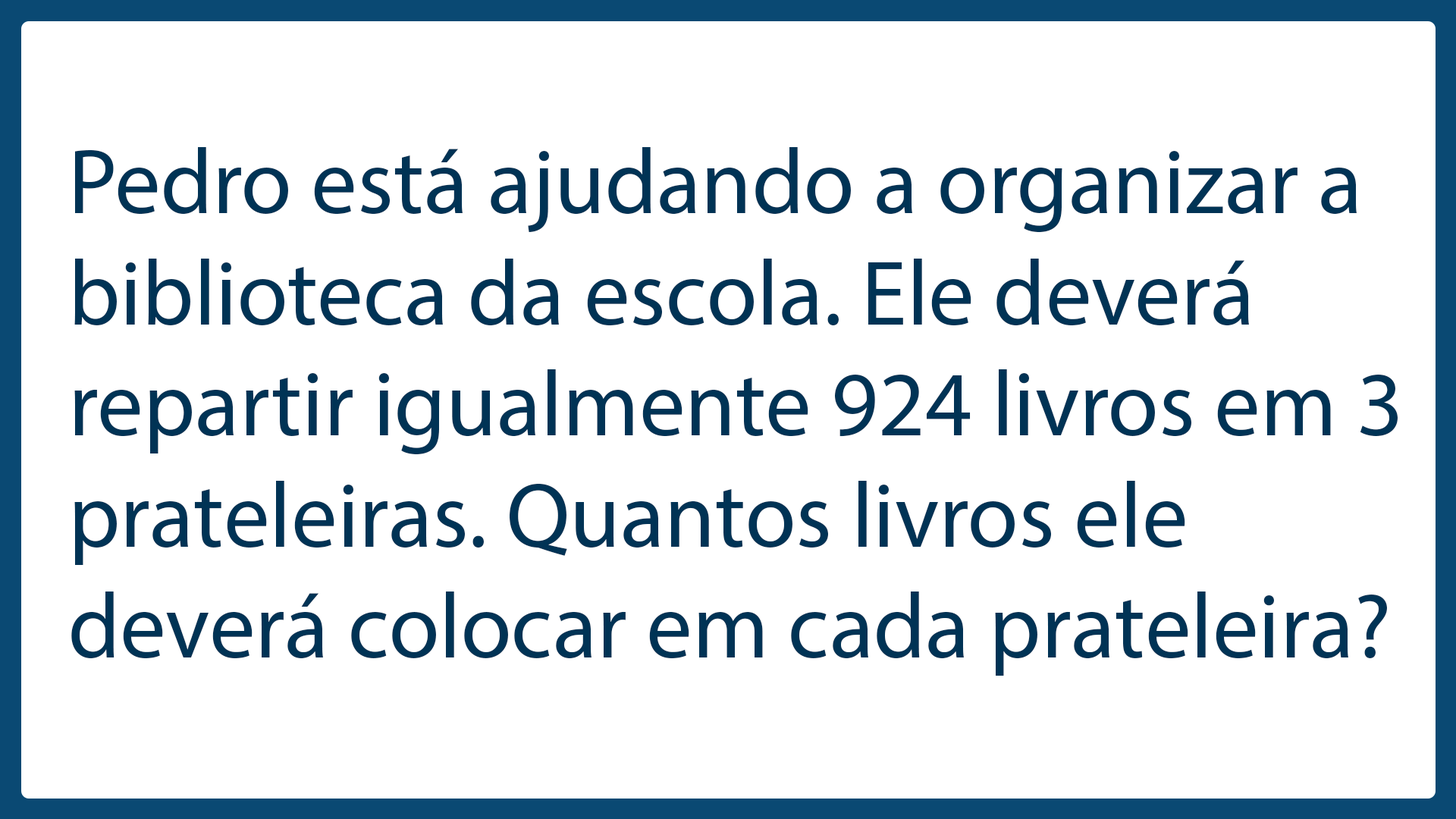
<style>
.page{position:relative;width:1456px;height:819px;background:#ffffff}
.page>*{position:absolute;margin:0}
.t1{font:92.6px "MyriadPro-Regular";color:#003355}
</style>
<div class="page">
<p class="t1" style="left:71px;top:147px;width:1327px;height:529px">Pedro está ajudando a organizar a biblioteca da escola. Ele deverá repartir igualmente 924 livros em 3 prateleiras. Quantos livros ele deverá colocar em cada prateleira?</p>
</div>
